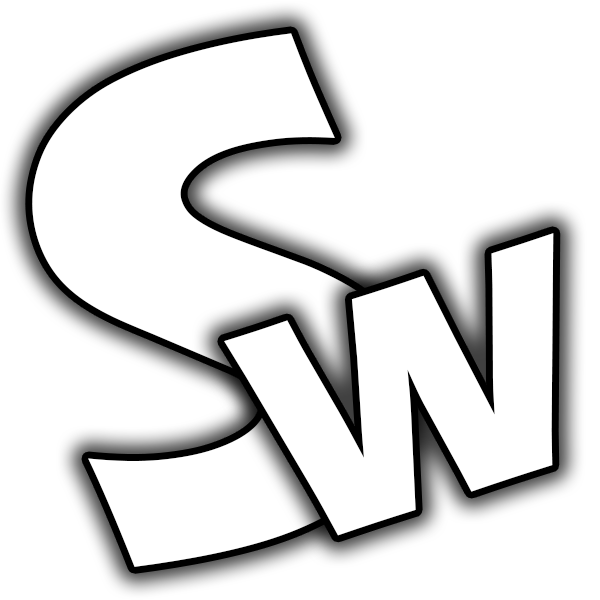
<style>
.page{position:relative;width:600px;height:600px;background:#ffffff}
.page>*{position:absolute;margin:0}
.t1{font:330.1px "ErasITC-Bold";letter-spacing:0.02em;color:#ffffff}
</style>
<div class="page">
<p class="t1" style="left:224px;top:233px;width:330px;height:303px;rotate:-18deg">W</p>
</div>
